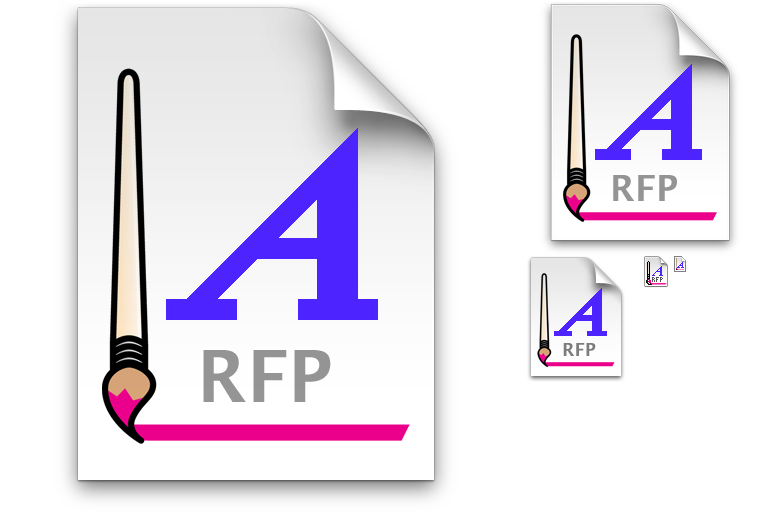
<style>
.page{position:relative;width:768px;height:512px;background:#ffffff}
.page>*{position:absolute;margin:0}
.t1{font:36px "LucidaGrande-Bold";color:#959595}
.t2{font:7px "KKFixed4x7";color:#555555}
.t3{font:72px "LucidaGrande-Bold";color:#959595}
.t4{font:18px "LucidaGrande-Bold";color:#7d7d7d}
</style>
<div class="page">
<p class="t1" style="left:613px;top:175px;width:64px;height:26px">RFP</p>
<p class="t2" style="left:652px;top:277px;width:11px;height:5px">RFP</p>
<p class="t3" style="left:203px;top:350px;width:128px;height:52px">RFP</p>
<p class="t4" style="left:563px;top:343px;width:33px;height:13px">RFP</p>
</div>
